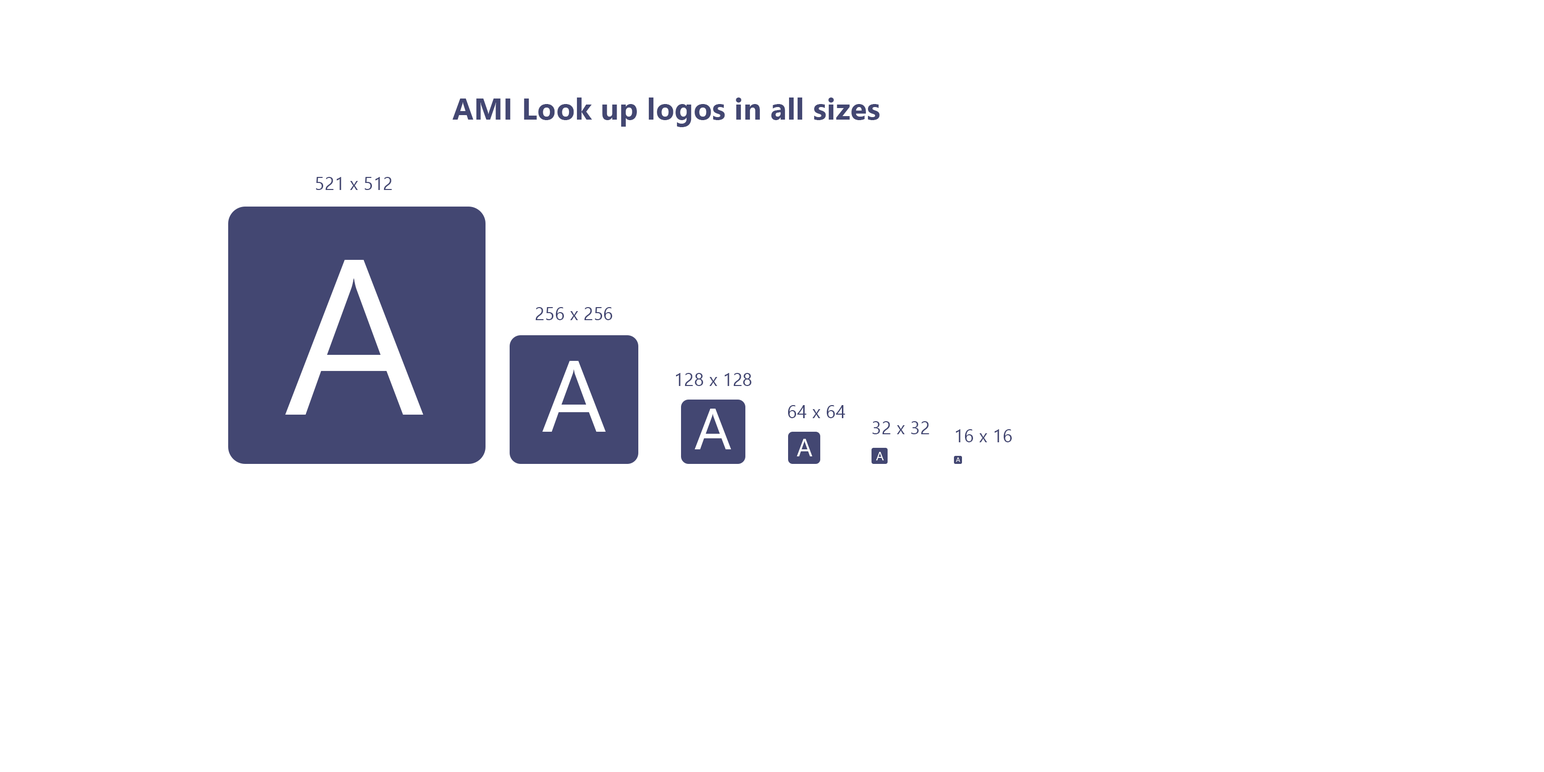
<style>
.page{position:relative;width:1544px;height:772px;background:#ffffff}
.page>*{position:absolute;margin:0}
.t1{font:30.2px "SegoeUI-Bold";letter-spacing:0.01em;color:#434772}
.t2{font:18.1px "SegoeUI";letter-spacing:0.01em;color:#434772}
.t3{font:221.4px "SegoeUI";letter-spacing:0.01em;color:#ffffff}
.t4{font:101.7px "SegoeUI";letter-spacing:0.01em;color:#ffffff}
.t5{font:58.6px "SegoeUI";letter-spacing:0.01em;color:#ffffff}
.t6{font:24.7px "SegoeUI";letter-spacing:0.01em;color:#ffffff}
.t7{font:12.1px "SegoeUI";letter-spacing:0.01em;color:#ffffff}
.t8{font:6.3px "SegoeUI";letter-spacing:0.01em;color:#ffffff}
</style>
<div class="page">
<p class="t1" style="left:452px;top:98px;width:428px;height:29px">AMI Look up logos in all sizes</p>
<p class="t2" style="left:316px;top:177px;width:76px;height:13px">521 x 512</p>
<p class="t3" style="left:285px;top:260px;width:138px;height:155px">A</p>
<p class="t2" style="left:535px;top:307px;width:77px;height:13px">256 x 256</p>
<p class="t4" style="left:542px;top:361px;width:64px;height:71px">A</p>
<p class="t2" style="left:676px;top:373px;width:76px;height:13px">128 x 128</p>
<p class="t5" style="left:695px;top:409px;width:36px;height:40px">A</p>
<p class="t2" style="left:788px;top:405px;width:58px;height:13px">64 x 64</p>
<p class="t2" style="left:873px;top:421px;width:56px;height:13px">32 x 32</p>
<p class="t2" style="left:956px;top:429px;width:56px;height:13px">16 x 16</p>
<p class="t6" style="left:797px;top:439px;width:15px;height:17px">A</p>
<p class="t7" style="left:876px;top:452px;width:8px;height:8px">A</p>
<p class="t8" style="left:956px;top:457px;width:5px;height:5px">A</p>
</div>
